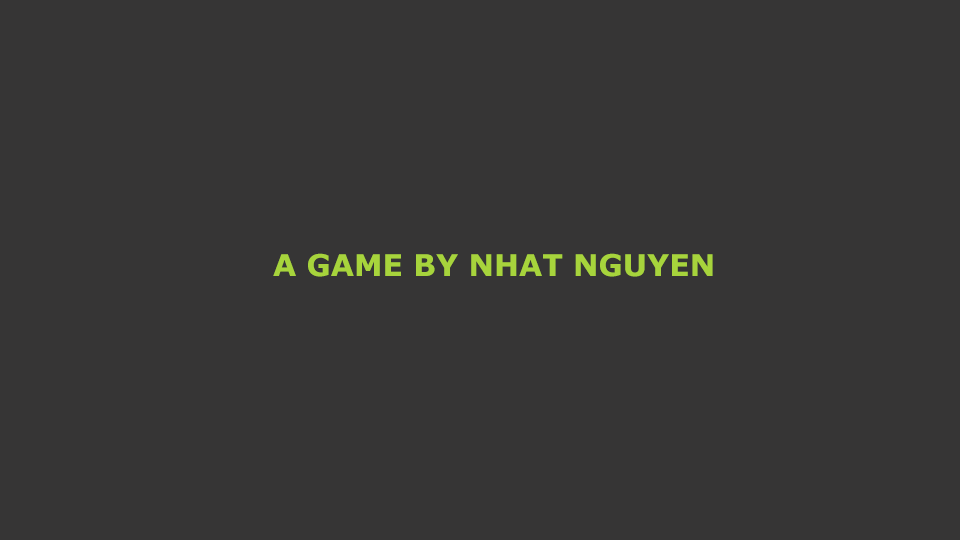
<style>
.page{position:relative;width:960px;height:540px;background:#363535}
.page>*{position:absolute;margin:0}
.t1{font:30px "Verdana-Bold";color:#a7d43c}
</style>
<div class="page">
<p class="t1" style="left:273px;top:253px;width:440px;height:24px">A GAME BY NHAT NGUYEN</p>
</div>
